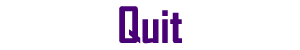
<style>
.page{position:relative;width:300px;height:50px;background:#ffffff}
.page>*{position:absolute;margin:0}
.t1{font:48px "AgencyFB-Bold";color:#480275}
</style>
<div class="page">
<p class="t1" style="left:119px;top:6px;width:63px;height:38px">Quit</p>
</div>
